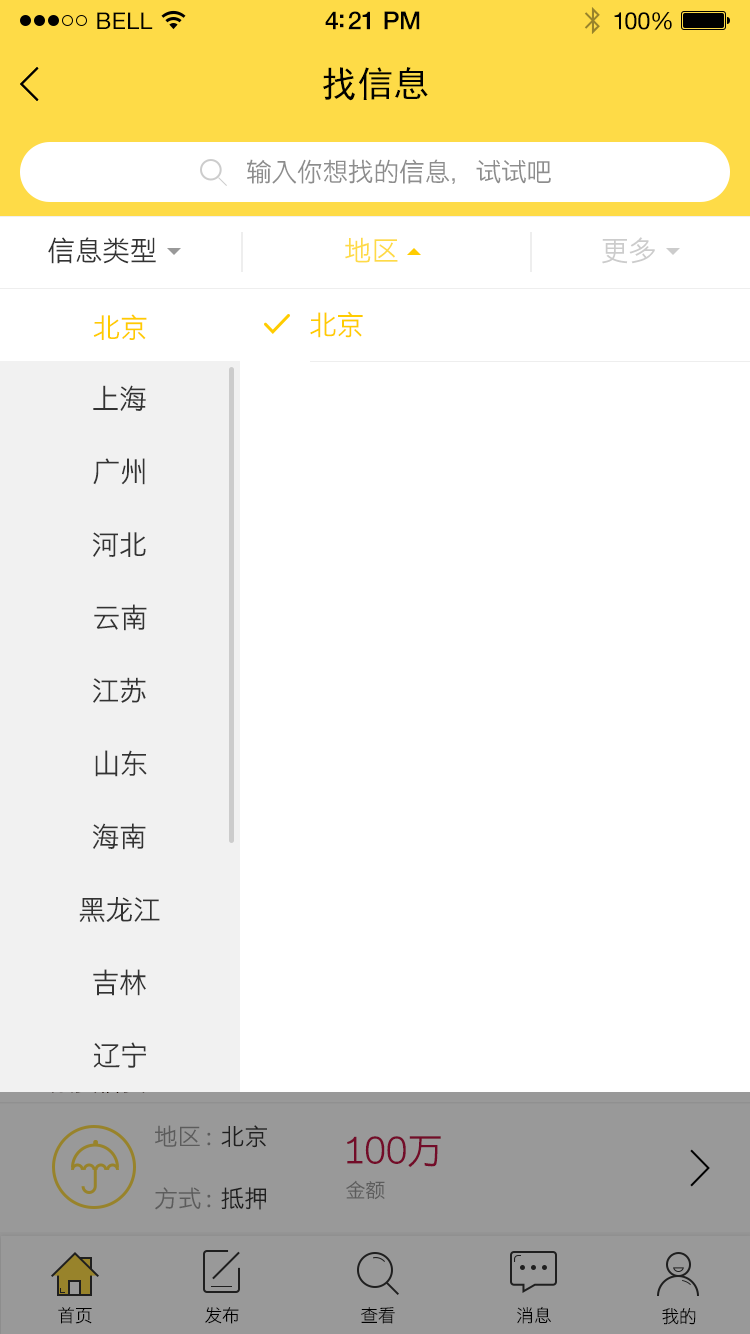
<style>
.page{position:relative;width:750px;height:1334px;background:#ffffff}
.page>*{position:absolute;margin:0}
.t1{font:23px "HelveticaNeue";letter-spacing:0.02em;color:#000000}
.t2{font:25px "HelveticaNeue-Medium";letter-spacing:-0.02em;color:#000000}
.t3{font:24px "HelveticaNeue";letter-spacing:-0.02em;color:#010101}
.t4{font:36px "SimHei";color:#000000}
.t5{font:26px "STHeitiSC-Light";letter-spacing:-0.02em;color:#8d8d8d}
.t6{font:28px "STHeitiSC-Light";letter-spacing:-0.02em;color:#333333}
.t7{font:28px "STHeitiSC-Light";letter-spacing:-0.02em;color:#fedb47}
.t8{font:28px "STHeitiSC-Light";letter-spacing:-0.02em;color:#cccccc}
.t9{font:28px "STHeitiSC-Light";letter-spacing:-0.02em;color:#ffcc00}
.t10{font:24px "STHeitiSC-Light";letter-spacing:-0.02em}
.t11{font:36px "STHeitiSC-Light";letter-spacing:-0.02em;color:#730c29}
.t12{font:20px "STHeitiSC-Light";letter-spacing:-0.02em;color:#5c5c5c}
.t13{font:18px "STHeitiSC-Light";letter-spacing:-0.02em;color:#000000}
</style>
<div class="page">
<p class="t1" style="left:97px;top:12px;width:56px;height:17px">BELL</p>
<p class="t1" style="left:97px;top:12px;width:56px;height:17px">BELL</p>
<p class="t2" style="left:325px;top:11px;width:95px;height:19px">4:21 PM</p>
<p class="t2" style="left:325px;top:11px;width:95px;height:19px">4:21 PM</p>
<p class="t3" style="left:614px;top:12px;width:58px;height:18px">100%</p>
<p class="t3" style="left:614px;top:12px;width:58px;height:18px">100%</p>
<p class="t4" style="left:323px;top:67px;width:105px;height:34px">找信息</p>
<p class="t5" style="left:247px;top:159px;width:304px;height:25px">输入你想找的信息，试试吧</p>
<p class="t6" style="left:48px;top:237px;width:108px;height:27px">信息类型</p>
<p class="t7" style="left:345px;top:237px;width:53px;height:26px">地区</p>
<p class="t8" style="left:602px;top:237px;width:53px;height:27px">更多</p>
<p class="t9" style="left:93px;top:314px;width:54px;height:26px">北京</p>
<p class="t9" style="left:310px;top:311px;width:53px;height:27px">北京</p>
<p class="t6" style="left:93px;top:385px;width:53px;height:26px">上海</p>
<p class="t6" style="left:93px;top:458px;width:52px;height:27px">广州</p>
<p class="t6" style="left:92px;top:532px;width:54px;height:25px">河北</p>
<p class="t6" style="left:94px;top:604px;width:53px;height:27px">云南</p>
<p class="t6" style="left:93px;top:677px;width:53px;height:26px">江苏</p>
<p class="t6" style="left:95px;top:750px;width:52px;height:27px">山东</p>
<p class="t6" style="left:93px;top:823px;width:53px;height:27px">海南</p>
<p class="t6" style="left:79px;top:897px;width:81px;height:26px">黑龙江</p>
<p class="t6" style="left:93px;top:969px;width:53px;height:27px">吉林</p>
<p class="t6" style="left:93px;top:1042px;width:53px;height:26px">辽宁</p>
<p class="t10" style="left:155px;top:1125px;width:112px;height:23px">地区 :  北京</p>
<p class="t11" style="left:347px;top:1136px;width:94px;height:32px">100万</p>
<p class="t12" style="left:346px;top:1180px;width:39px;height:20px">金额</p>
<p class="t10" style="left:155px;top:1187px;width:111px;height:23px">方式 :  抵押</p>
<p class="t13" style="left:58px;top:1307px;width:34px;height:17px">首页</p>
<p class="t13" style="left:205px;top:1307px;width:34px;height:17px">发布</p>
<p class="t13" style="left:361px;top:1307px;width:34px;height:17px">查看</p>
<p class="t13" style="left:517px;top:1306px;width:34px;height:18px">消息</p>
<p class="t13" style="left:662px;top:1308px;width:34px;height:17px">我的</p>
</div>
